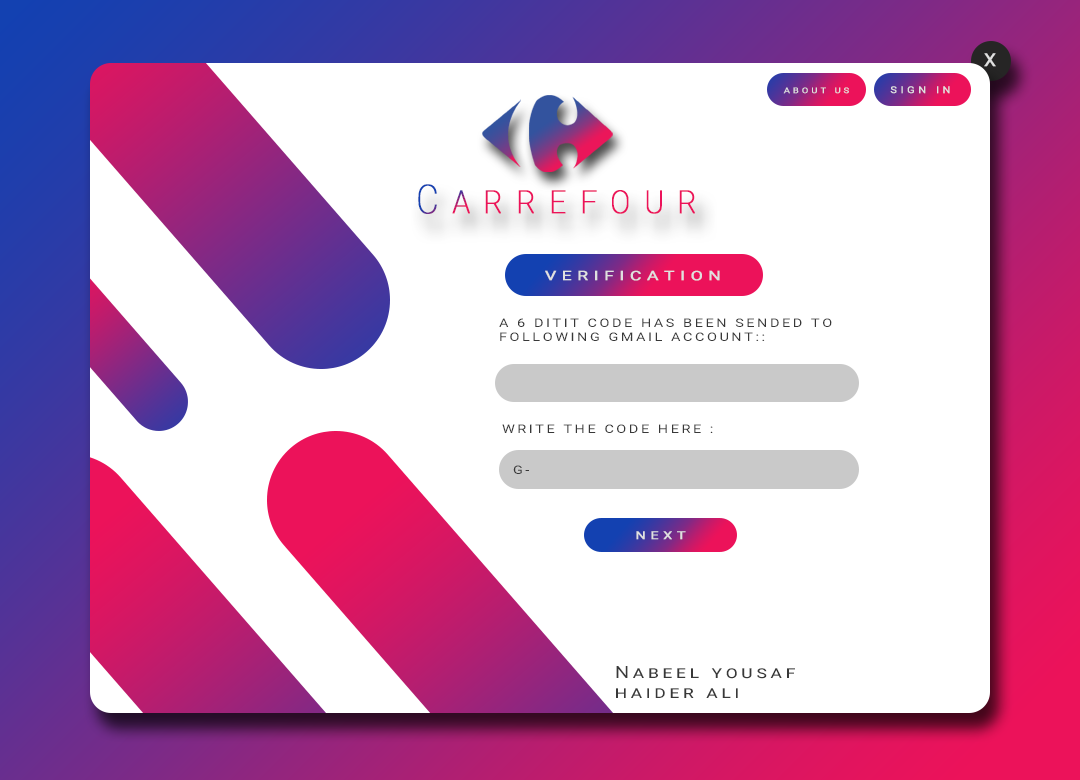
<style>
.page{position:relative;width:1080px;height:780px;background:#ffffff}
.page>*{position:absolute;margin:0}
.t1{font:18px "Roboto-Regular";letter-spacing:0.3em;color:#e0e0e0;font-weight:bold;scale:1.05 1}
.t2{font:7.9px "Roboto-Regular";letter-spacing:0.3em;color:#e0e0e0;text-transform:uppercase;font-weight:bold;scale:1.19 1}
.t3{font:9.4px "Roboto-Regular";letter-spacing:0.3em;color:#e0e0e0;text-transform:uppercase;font-weight:bold;scale:1.17 1}
.t4{font:40px "Roboto-Thin";letter-spacing:0.38em;color:#ec125a;font-variant:small-caps;font-weight:bold;scale:0.85 1}
.t5{font:13px "Roboto-Regular";letter-spacing:0.3em;color:#e0e0e0;text-transform:uppercase;font-weight:bold;scale:1.34 1}
.t6{font:12px "Roboto-Regular";letter-spacing:0.18em;color:#383838;text-transform:uppercase;scale:1.2 1}
.t7{font:10.7px "Roboto-Regular";letter-spacing:0.3em;color:#e0e0e0;text-transform:uppercase;font-weight:bold;scale:1.34 1}
.t8{font:16.9px "Roboto-Regular";letter-spacing:0.18em;color:#383838;font-variant:small-caps;scale:1.2 1}
</style>
<div class="page">
<p class="t1" style="left:984px;top:53px;width:12px;height:14px">X</p>
<p class="t2" style="left:783px;top:87px;width:66px;height:7px">About Us</p>
<p class="t3" style="left:890px;top:86px;width:60px;height:8px">Sign in</p>
<p class="t4" style="left:418px;top:184px;width:277px;height:30px">Carrefour</p>
<p class="t5" style="left:545px;top:270px;width:175px;height:11px">Verification</p>
<p class="t6" style="left:499px;top:318px;width:333px;height:23px">a 6 ditit code has been sended to <br>following gmail account::</p>
<p class="t6" style="left:502px;top:424px;width:211px;height:9px">Write the code here :</p>
<p class="t6" style="left:513px;top:465px;width:16px;height:9px">g-</p>
<p class="t7" style="left:636px;top:531px;width:50px;height:9px">next</p>
<p class="t8" style="left:616px;top:666px;width:179px;height:32px">Nabeel yousaf<br>haider ali</p>
</div>
